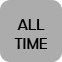
<style>
.page{position:relative;width:62px;height:62px;background:#acacac}
.page>*{position:absolute;margin:0}
.t1{font:16px "BerlinSansFB-Reg";color:#000000}
</style>
<div class="page">
<p class="t1" style="left:14px;top:19px;width:34px;height:30px;text-align:center">ALL TIME</p>
</div>
